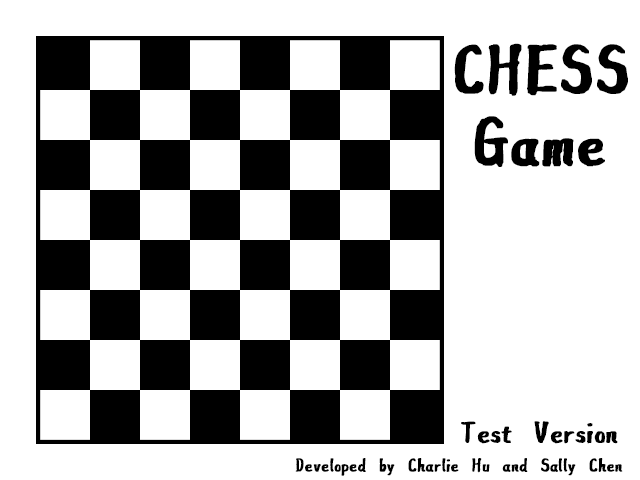
<style>
.page{position:relative;width:640px;height:480px;background:#ffffff}
.page>*{position:absolute;margin:0}
.t1{font:92.8px "FZZJ-ZZGKTFONT";color:#000000;font-weight:bold}
.t2{font:40.4px "FZZJ-ZZGKTFONT";color:#000000;font-weight:bold}
.t3{font:25px "FZZJ-ZZGKTFONT";color:#000000;font-weight:bold}
</style>
<div class="page">
<p class="t1" style="left:454px;top:43px;width:174px;height:53px">CHESS</p>
<p class="t1" style="left:474px;top:116px;width:131px;height:51px">Game</p>
<p class="t2" style="left:461px;top:421px;width:157px;height:23px">Test Version</p>
<p class="t3" style="left:295px;top:458px;width:328px;height:18px">Developed by Charlie Hu and Sally Chen</p>
</div>
